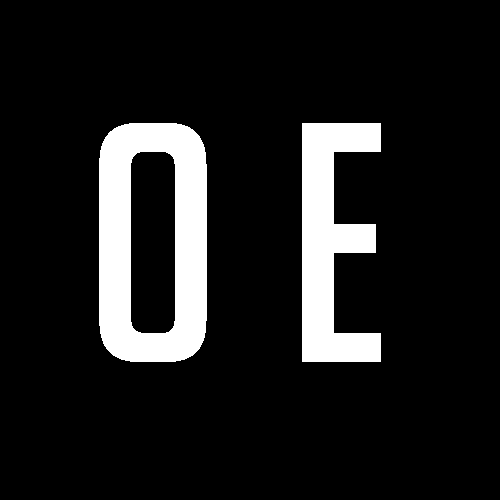
<style>
.page{position:relative;width:500px;height:500px;background:#000000}
.page>*{position:absolute;margin:0}
.t1{font:333.3px "BigNoodleTitling";letter-spacing:0.2em;color:#ffffff;text-transform:uppercase}
</style>
<div class="page">
<p class="t1" style="left:99px;top:123px;width:282px;height:239px">oe</p>
</div>
